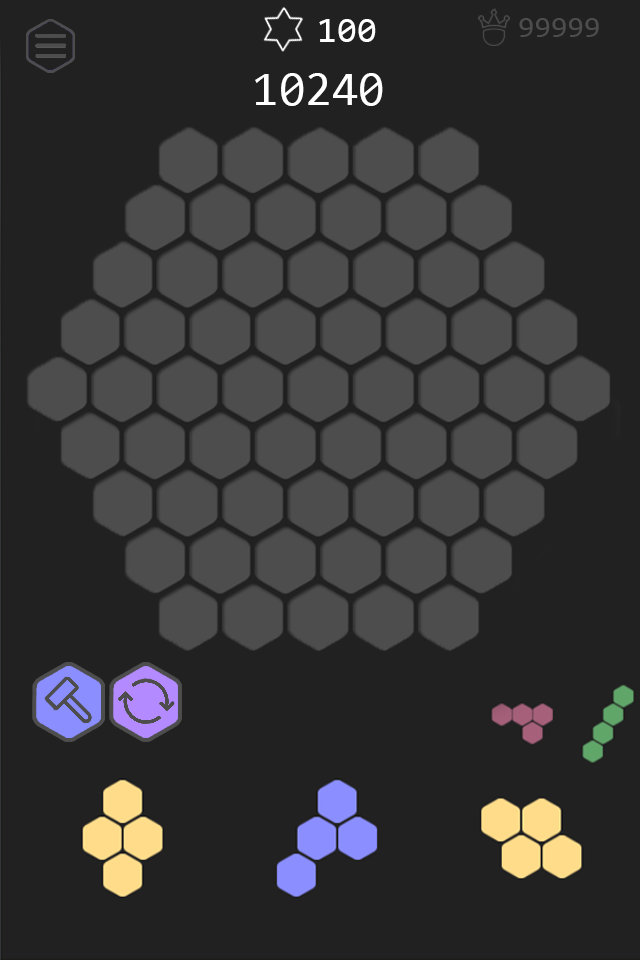
<style>
.page{position:relative;width:640px;height:960px;background:#212121}
.page>*{position:absolute;margin:0}
.t1{font:36px "Consolas";color:#ffffff}
.t2{font:30px "Consolas";color:#4d4d4d}
.t3{font:48px "Consolas";color:#ffffff}
</style>
<div class="page">
<p class="t1" style="left:319px;top:19px;width:57px;height:23px">100</p>
<p class="t2" style="left:519px;top:18px;width:80px;height:19px">99999</p>
<p class="t3" style="left:255px;top:73px;width:128px;height:33px">10240</p>
</div>
